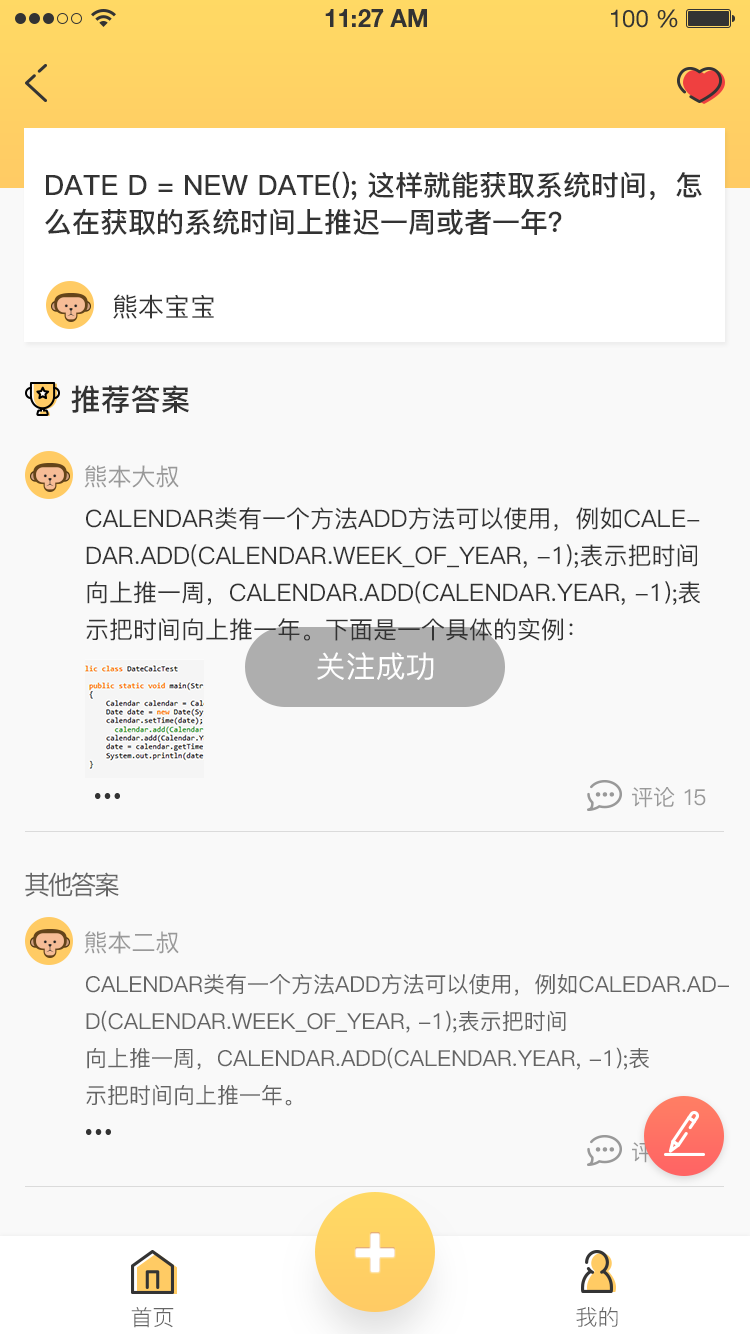
<style>
.page{position:relative;width:750px;height:1334px;background:#f9f9f9}
.page>*{position:absolute;margin:0}
.t1{font:28px/37px "PingFang-SC-Bold";color:#333333;text-transform:uppercase}
.t2{font:26px "PingFang-SC-Medium";color:#333333;text-transform:uppercase}
.t3{font:30px "PingFang-SC-Bold";color:#333333;text-transform:uppercase}
.t4{font:24px "PingFang-SC-Medium";color:#999999;text-transform:uppercase}
.t5{font:24px/37px "PingFang-SC-Medium";color:#333333;text-transform:uppercase}
.t6{font:30px "PingFang-SC-Medium";color:#ffffff;text-transform:uppercase}
.t7{font:22px "PingFang-SC-Medium";color:#999999;text-transform:uppercase}
.t8{font:22px "PingFang-SC-Medium";letter-spacing:-0.1em;color:#999999;text-transform:uppercase}
.t9{font:26px "PingFang-SC-Medium";letter-spacing:-0.1em;color:#666666;text-transform:uppercase}
.t10{font:22px/37px "PingFang-SC-Medium";color:#646464;text-transform:uppercase}
.t11{font:22px "PingFang-SC-Medium";text-transform:uppercase}
.t12{font:22px "PingFang-SC-Medium";letter-spacing:-0.1em;text-transform:uppercase}
.t13{font:22px "PingFang-SC-Regular";color:#666666;text-transform:uppercase}
</style>
<div class="page">
<p class="t1" style="left:45px;top:171px;width:657px;height:64px">Date d = new Date(); 这样就能获取系统时间，怎<br>么在获取的系统时间上推迟一周或者一年？</p>
<p class="t2" style="left:113px;top:294px;width:101px;height:25px">熊本宝宝</p>
<p class="t3" style="left:71px;top:385px;width:118px;height:29px">推荐答案</p>
<p class="t4" style="left:84px;top:465px;width:95px;height:23px">熊本大叔</p>
<p class="t5" style="left:86px;top:507px;width:614px;height:134px">Calendar类有一个方法add方法可以使用，例如caledar.add(Calendar.WEEK_OF_YEAR, -1);表示把时间<br>向上推一周，calendar.add(Calendar.YEAR, -1);表<br>示把时间向上推一年。下面是一个具体的实例：</p>
<p class="t6" style="left:317px;top:652px;width:117px;height:28px">关注成功</p>
<p class="t7" style="left:632px;top:787px;width:74px;height:21px">评论 <span class="t8">15</span></p>
<p class="t9" style="left:25px;top:872px;width:94px;height:25px">其他答案</p>
<p class="t4" style="left:84px;top:931px;width:95px;height:23px">熊本二叔</p>
<p class="t10" style="left:86px;top:974px;width:643px;height:132px">Calendar类有一个方法add方法可以使用，例如caledar.add(Calendar.WEEK_OF_YEAR, -1);表示把时间<br>向上推一周，calendar.add(Calendar.YEAR, -1);表<br>示把时间向上推一年。</p>
<p class="t11" style="left:632px;top:1142px;width:74px;height:21px">评论 <span class="t12">15</span></p>
<p class="t13" style="left:131px;top:1307px;width:43px;height:21px">首页</p>
<p class="t13" style="left:576px;top:1307px;width:42px;height:20px">我的</p>
</div>
